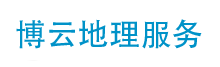
<style>
.page{position:relative;width:220px;height:67px;background:#ffffff}
.page>*{position:absolute;margin:0}
.t1{font:31.3px "AdobeHeitiStd-Regular";color:#0092c8}
</style>
<div class="page">
<p class="t1" style="left:16px;top:19px;width:186px;height:30px">博云地理服务</p>
</div>
